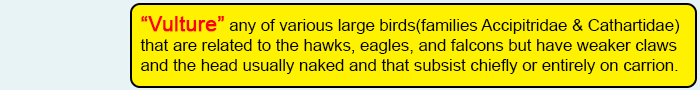
<style>
.page{position:relative;width:700px;height:90px;background:#fff200}
.page>*{position:absolute;margin:0}
.t1{font:16.7px "ArialMT";color:#020202}
.t2{font:20.8px "ArialMT";color:#fd010d;font-weight:bold}
</style>
<div class="page">
<p class="t1" style="left:140px;top:16px;width:540px;height:58px"><span class="t2">“Vulture”</span> any of various large birds(families Accipitridae &amp; Cathartidae) <br>that are related to the hawks, eagles, and falcons but have weaker claws <br>and the head usually naked and that subsist chiefly or entirely on carrion.</p>
</div>
